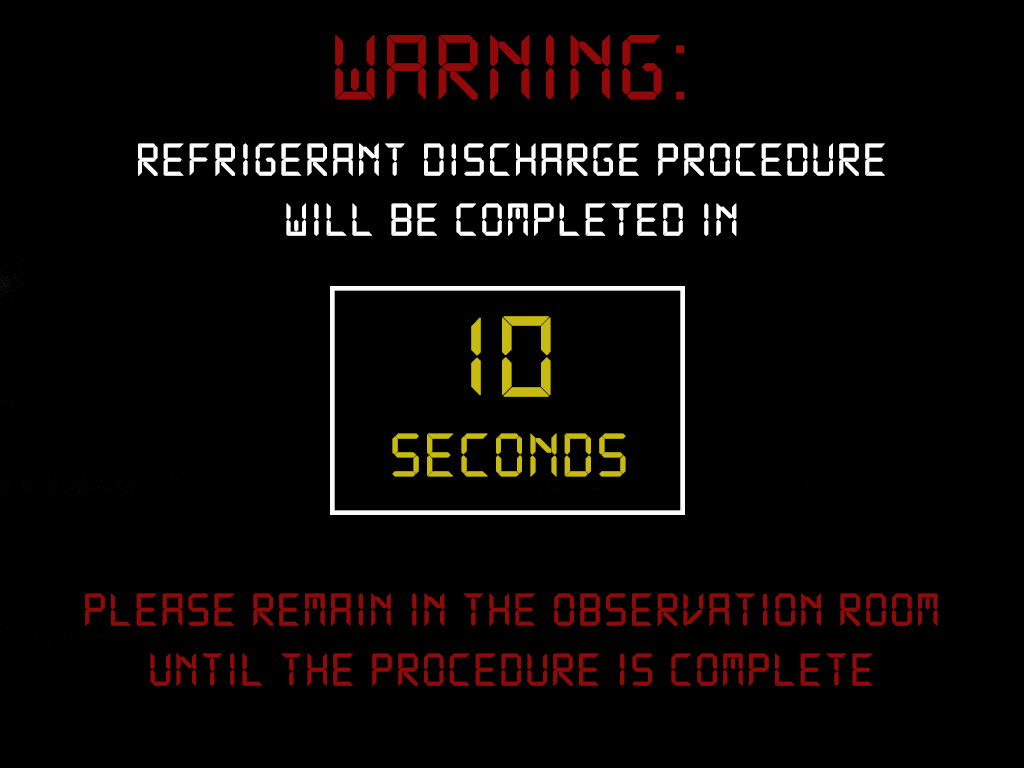
<style>
.page{position:relative;width:1024px;height:768px;background:#000000}
.page>*{position:absolute;margin:0}
.t1{font:100px "DS-Digital";color:#930909;font-weight:bold}
.t2{font:12px "DS-Digital";color:#ffffff;font-weight:bold}
.t3{font:66.7px "DS-Digital";color:#c7bb12;font-weight:bold}
.t4{font:125px "DS-Digital";color:#c7bb12;font-weight:bold}
.t5{font:12px "DS-Digital";color:#910a0a;font-weight:bold}
</style>
<div class="page">
<p class="t1" style="left:335px;top:34px;width:349px;height:66px">WARNING:</p>
<p class="t2" style="left:138px;top:143px;width:747px;height:93px;text-align:center">refrigerant discharge Procedure <br>will be completed in</p>
<p class="t3" style="left:392px;top:316px;width:234px;height:161px;text-align:center"><span class="t4">10 <br></span>SEconds</p>
<p class="t5" style="left:85px;top:593px;width:853px;height:93px;text-align:center">Please remain in the observation room until the procedure is complete</p>
</div>
